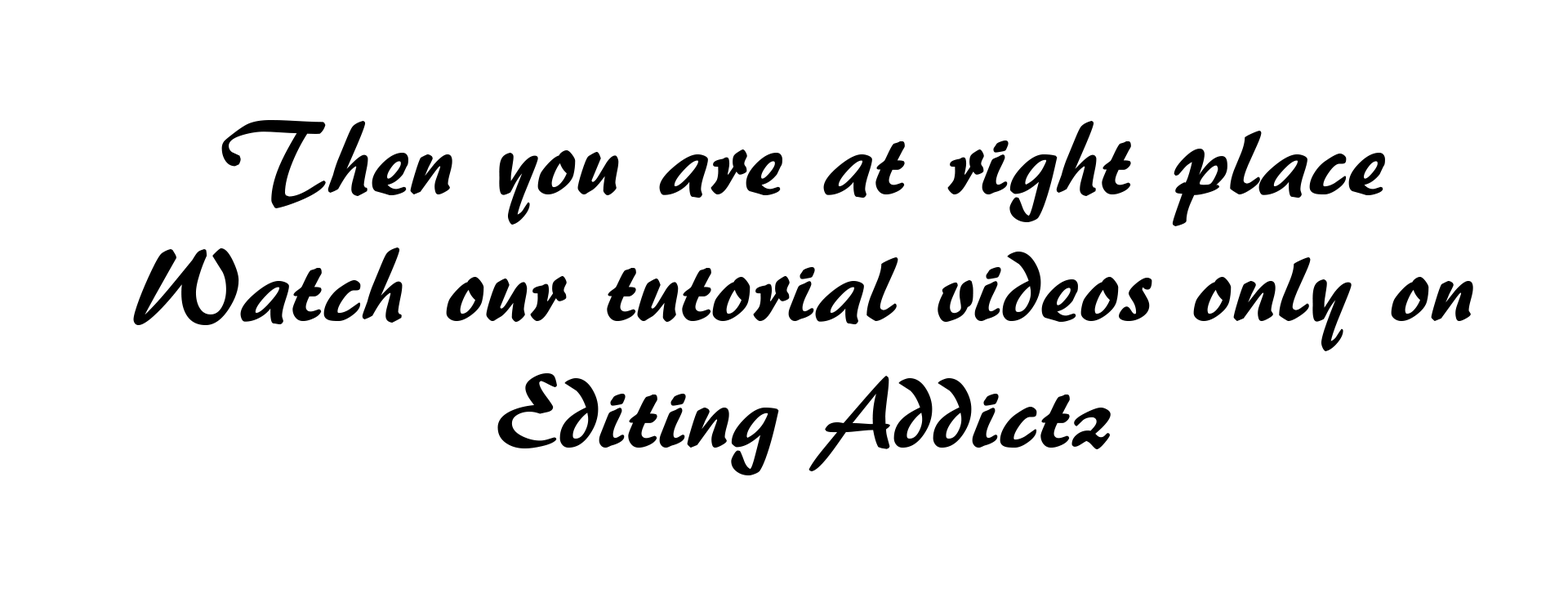
<style>
.page{position:relative;width:1568px;height:593px;background:#ffffff}
.page>*{position:absolute;margin:0}
.t1{font:105.5px "ARBERKLEY";color:#000000}
</style>
<div class="page">
<p class="t1" style="left:133px;top:120px;width:1340px;height:355px;text-align:center">Then you are at right place<br>Watch our tutorial videos only on<br>Editing Addictz</p>
</div>
